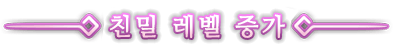
<style>
.page{position:relative;width:393px;height:52px;background:#ffffff}
.page>*{position:absolute;margin:0}
.t1{font:24px "NanumMyeongjo";letter-spacing:0.12em;color:#fffffd;font-weight:bold}
</style>
<div class="page">
<p class="t1" style="left:110px;top:14px;width:175px;height:24px">친밀 레벨 증가</p>
</div>
